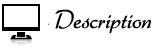
<style>
.page{position:relative;width:158px;height:48px;background:#ffffff}
.page>*{position:absolute;margin:0}
.t1{font:27px "Gabrielle";color:#000000}
</style>
<div class="page">
<p class="t1" style="left:55px;top:9px;width:96px;height:25px">Description</p>
</div>
